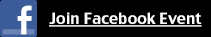
<style>
.page{position:relative;width:211px;height:37px;background:#000000}
.page>*{position:absolute;margin:0}
.t1{font:15px "CharcoalCY";color:#ffffff;text-decoration:underline}
</style>
<div class="page">
<p class="t1" style="left:49px;top:12px;width:153px;height:15px">Join Facebook Event</p>
</div>
